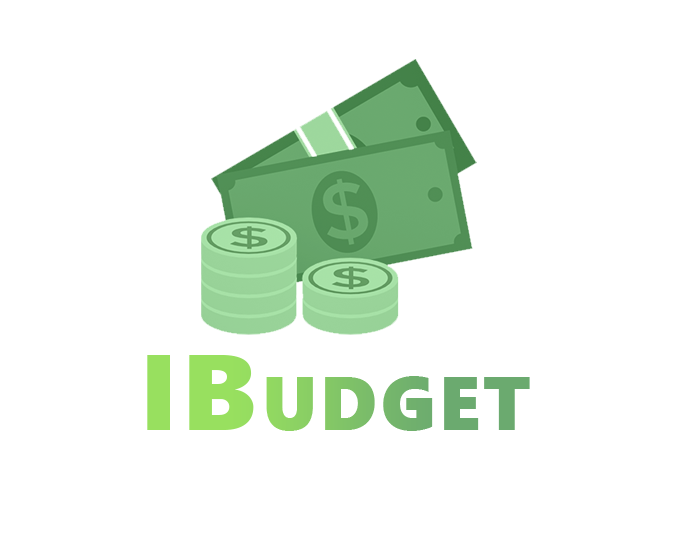
<style>
.page{position:relative;width:678px;height:537px;background:#ffffff}
.page>*{position:absolute;margin:0}
.t1{font:106.7px "SegoeUIBlack";letter-spacing:0.05em;font-variant:small-caps}
</style>
<div class="page">
<p class="t1" style="left:147px;top:355px;width:383px;height:76px">IBudget</p>
</div>
